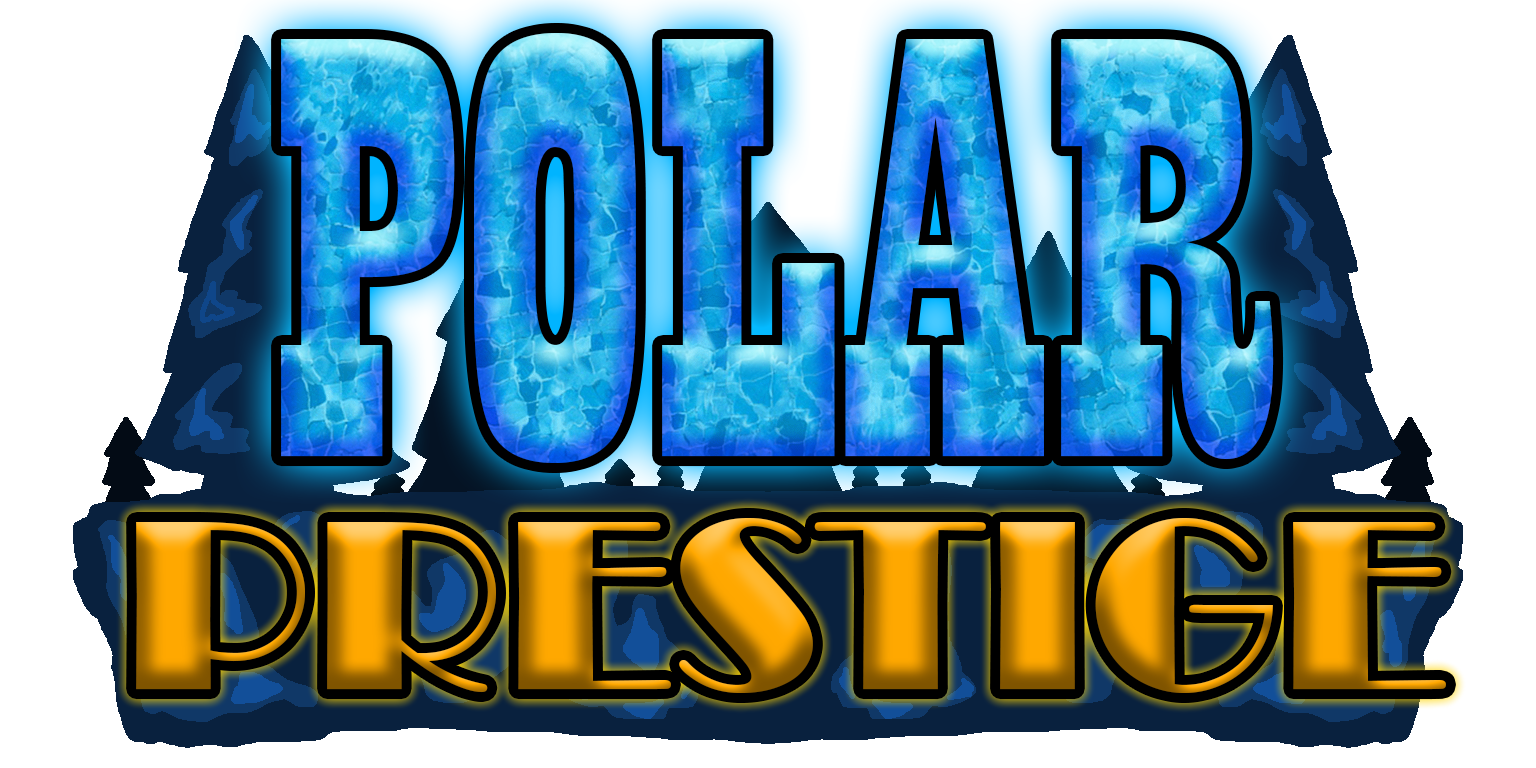
<style>
.page{position:relative;width:1536px;height:768px;background:#ffffff}
.page>*{position:absolute;margin:0}
.t1{font:625px "Playbill"}
.t2{font:250px "Broadway"}
</style>
<div class="page">
<p class="t1" style="left:281px;top:33px;width:993px;height:430px">POLAR</p>
<p class="t2" style="left:136px;top:518px;width:1310px;height:175px">PRESTIGE</p>
</div>
